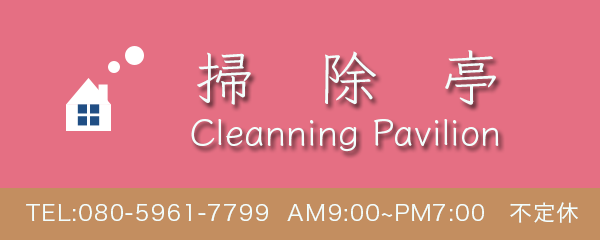
<style>
.page{position:relative;width:600px;height:240px;background:#e56f83}
.page>*{position:absolute;margin:0}
.t1{font:60px "Klee-Medium";letter-spacing:1.06em;color:#f3fefd}
.t2{font:36px "Klee-Medium";color:#f3fefd}
.t3{font:22px "HiraginoSans-W3";letter-spacing:0.06em;color:#f3fefd}
</style>
<div class="page">
<p class="t1" style="left:197px;top:50px;width:299px;height:55px">掃除亭</p>
<p class="t2" style="left:191px;top:119px;width:308px;height:33px">Cleanning Pavilion</p>
<p class="t3" style="left:26px;top:202px;width:552px;height:21px">TEL:080-5961-7799  AM9:00~PM7:00　不定休</p>
</div>
